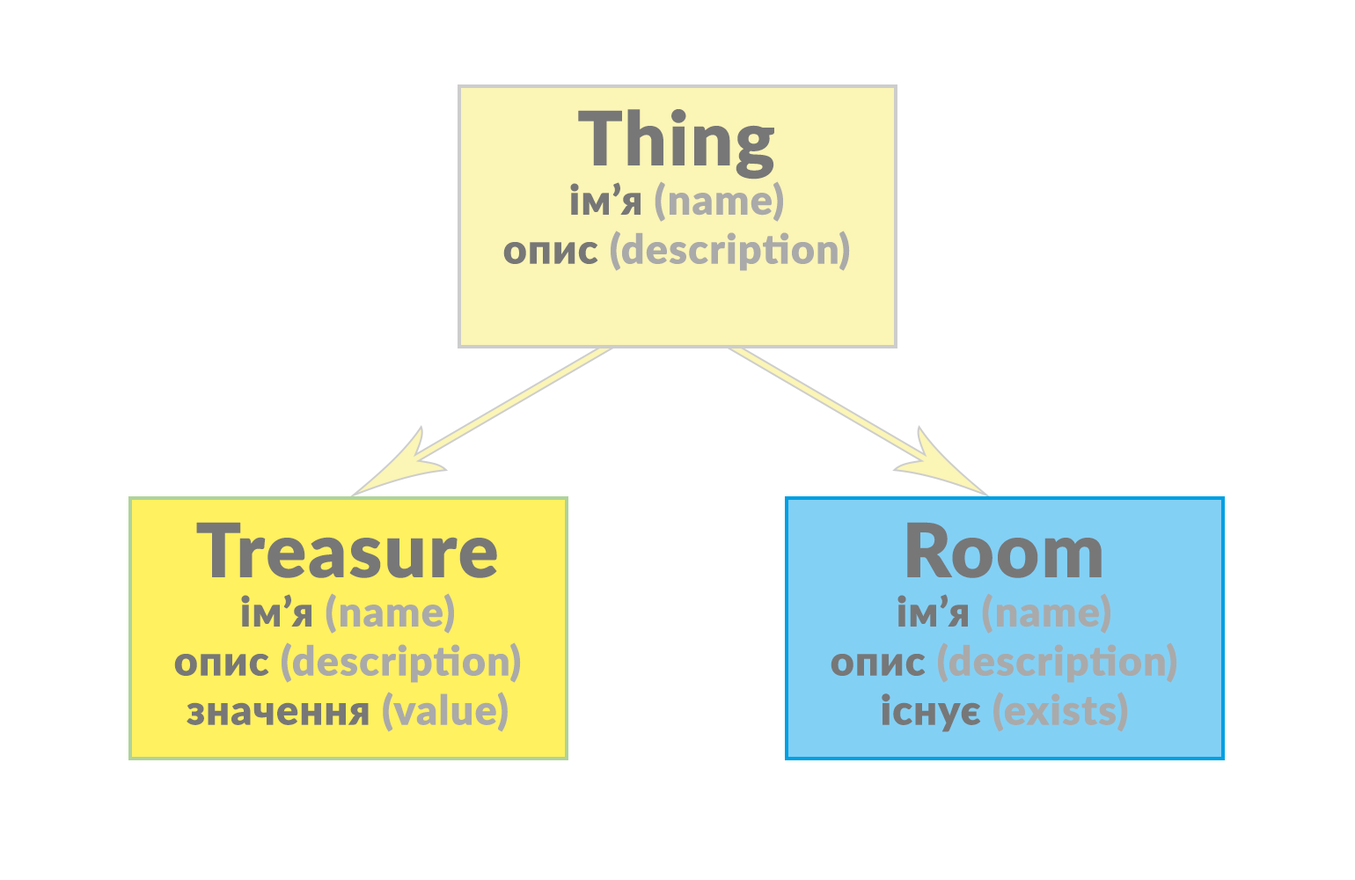
<style>
.page{position:relative;width:1355px;height:880px;background:#ffffff}
.page>*{position:absolute;margin:0}
.t1{font:41px "Lato-Black";color:#aaaaaa;font-weight:bold}
.t2{font:74.5px "Lato-Black";color:#777777;font-weight:bold}
.t3{font:41px "Lato-Black";color:#777777;font-weight:bold}
</style>
<div class="page">
<p class="t1" style="left:503px;top:109px;width:347px;height:162px;text-align:center"><span class="t2">Thing<br></span><span class="t3">ім’я </span>(name)<br><span class="t3">опис </span>(description)</p>
<p class="t1" style="left:174px;top:522px;width:347px;height:210px;text-align:center"><span class="t2">Treasure<br></span><span class="t3">ім’я </span>(name)<br><span class="t3">опис </span>(description)<br><span class="t3">значення </span>(value)</p>
<p class="t1" style="left:831px;top:522px;width:346px;height:210px;text-align:center"><span class="t2">Room<br></span><span class="t3">ім’я </span>(name)<br><span class="t3">опис </span>(description)<br><span class="t3">існує</span> (exists)</p>
</div>
